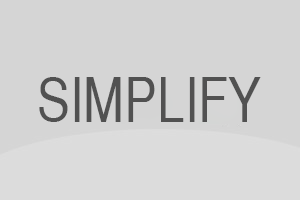
<style>
.page{position:relative;width:300px;height:200px;background:#d5d5d5}
.page>*{position:absolute;margin:0}
.t1{font:60px "HelveticaCYPlain";color:#515151}
</style>
<div class="page">
<p class="t1" style="left:39px;top:77px;width:222px;height:45px">SIMPLIFY</p>
</div>
